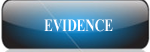
<style>
.page{position:relative;width:150px;height:52px}
.page>*{position:absolute;margin:0}
.t1{font:17.3px "TimesNewRomanPS-BoldMT";color:#fcfcff;scale:0.75 1}
</style>
<div class="page">
<p class="t1" style="left:44px;top:19px;width:69px;height:13px">EVIDENCE</p>
</div>
